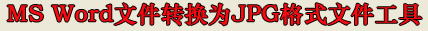
<style>
.page{position:relative;width:428px;height:31px;background:#ece9d8}
.page>*{position:absolute;margin:0}
.t1{font:23px "STZhongsong";color:#f70b10;font-weight:bold}
</style>
<div class="page">
<p class="t1" style="left:7px;top:3px;width:415px;height:23px">MS Word文件转换为JPG格式文件工具</p>
</div>
